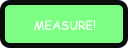
<style>
.page{position:relative;width:128px;height:48px;background:#7cff82}
.page>*{position:absolute;margin:0}
.t1{font:12px "ComicSansMS";color:#ffffff}
</style>
<div class="page">
<p class="t1" style="left:34px;top:20px;width:61px;height:11px">MEASURE!</p>
</div>
